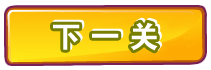
<style>
.page{position:relative;width:211px;height:70px;background:#ffffff}
.page>*{position:absolute;margin:0}
.t1{font:30px "Jdahei";letter-spacing:0.3em;color:#ffffff}
</style>
<div class="page">
<p class="t1" style="left:53px;top:22px;width:105px;height:29px">下一关</p>
</div>
